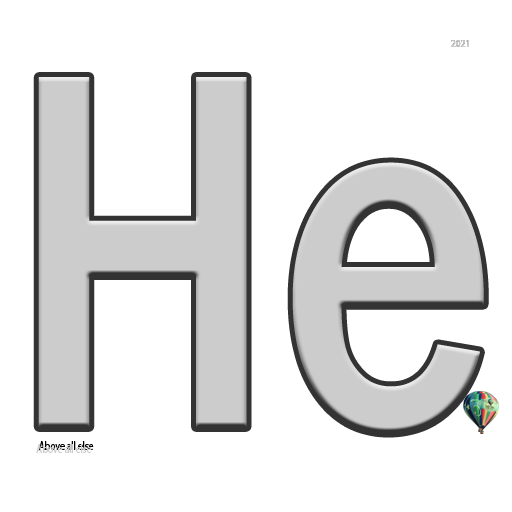
<style>
.page{position:relative;width:512px;height:512px;background:#ffffff}
.page>*{position:absolute;margin:0}
.t1{font:10px "MyriadPro-Regular";color:#cccccc;scale:0.96 1}
.t2{font:12px "MyriadPro-Regular";scale:0.8 1}
</style>
<div class="page">
<p class="t1" style="left:451px;top:40px;width:18px;height:7px">2021</p>
<p class="t1" style="left:451px;top:40px;width:18px;height:7px">2021</p>
<p class="t2" style="left:39px;top:441px;width:55px;height:9px">Above all else</p>
</div>
